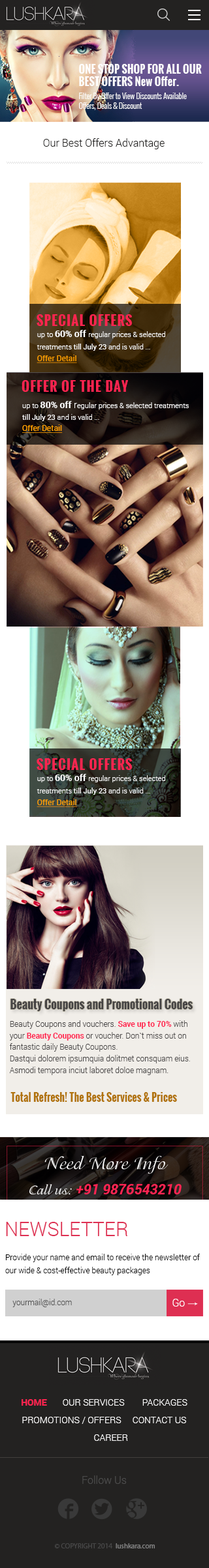
<style>
.page{position:relative;width:209px;height:1568px;background:#ffffff}
.page>*{position:absolute;margin:0}
.t1{font:7.6px/12.9px "Oswald-Light";color:#fefefe}
.t2{font:10.6px/13.7px "Oswald-Bold";color:#fefefe}
.t3{font:10.6px/12.8px "Oswald-Bold";color:#fefefe}
.t4{font:7.6px/9.7px "Oswald-Light";color:#fefefe}
.t5{font:10.4px "Roboto-Light";color:#232221}
.t6{font:13.4px "Oswald-Bold";letter-spacing:0.06em;color:#ff2450;text-transform:uppercase}
.t7{font:7.2px/11.9px "Roboto-Light";color:#ffffff}
.t8{font:9.1px/11.9px "Roboto-Bold";color:#ffffff}
.t9{font:7.2px/11.9px "Roboto-Regular";color:#ffffff}
.t10{font:7.8px/11.9px "Roboto-Regular";color:#ff9f00;text-decoration:underline}
.t11{font:7.2px/11.5px "Roboto-Light";color:#ffffff}
.t12{font:7.4px/11.5px "Roboto-Light";color:#ffffff}
.t13{font:9.1px/11.5px "Roboto-Bold";color:#ffffff}
.t14{font:9.1px/11.5px "Roboto-Light";color:#ffffff}
.t15{font:7.2px/11.5px "Roboto-Regular";color:#ffffff}
.t16{font:7.8px/11.5px "Roboto-Regular";color:#ff9f00;text-decoration:underline}
.t17{font:11.7px "Oswald-Bold";color:#464444}
.t18{font:7.8px/11.5px "Roboto-Light";color:#464444}
.t19{font:7.8px/11.5px "Roboto-Bold";color:#ff2450}
.t20{font:10.4px "Oswald-Bold";color:#b1730c}
</style>
<div class="page">
<p class="t1" style="left:79px;top:64px;width:122px;height:46px"><span class="t2">ONE STOP SHOP FOR ALL OUR </span><span class="t3"><br>BEST OFFERS New Offer. <br></span>Filter By Offer to View Discounts Available<span class="t4"><br>Offers, Deals &amp; Discount</span></p>
<p class="t5" style="left:43px;top:138px;width:121px;height:11px">Our Best Offers Advantage</p>
<p class="t6" style="left:37px;top:314px;width:95px;height:12px">Special offers</p>
<p class="t7" style="left:37px;top:330px;width:128px;height:33px">up to <span class="t8">60% off </span>regular prices &amp; selected treatments <span class="t9">till July 23</span> and is valid ...<br><span class="t10">Offer Detail</span></p>
<p class="t6" style="left:22px;top:380px;width:106px;height:12px">Offer Of The Day</p>
<p class="t11" style="left:22px;top:401px;width:166px;height:32px"><span class="t12">u</span>p to <span class="t13">80% off </span><span class="t14">r</span>egular prices &amp; selected treatments <span class="t15">till July 23</span> and is valid ...<br><span class="t16">Offer Detail</span></p>
<p class="t6" style="left:37px;top:758px;width:95px;height:12px">Special offers</p>
<p class="t7" style="left:37px;top:774px;width:128px;height:33px">up to <span class="t8">60% off </span>regular prices &amp; selected treatments <span class="t9">till July 23</span> and is valid ...<br><span class="t10">Offer Detail</span></p>
<p class="t17" style="left:10px;top:999px;width:182px;height:12px">Beauty Coupons and Promotional Codes</p>
<p class="t18" style="left:9px;top:1020px;width:181px;height:55px">Beauty Coupons and vouchers. <span class="t19">Save up to 70% </span>with your <span class="t19">Beauty Coupons </span>or voucher. Don`t miss out on fantastic daily Beauty Coupons.<br>Dastqui dolorem ipsumquia dolitmet consquam eius. Asmodi tempora inciut laboret doloe magnam.</p>
<p class="t20" style="left:10px;top:1092px;width:167px;height:10px">Total Refresh! The Best Services &amp; Prices</p>
</div>
